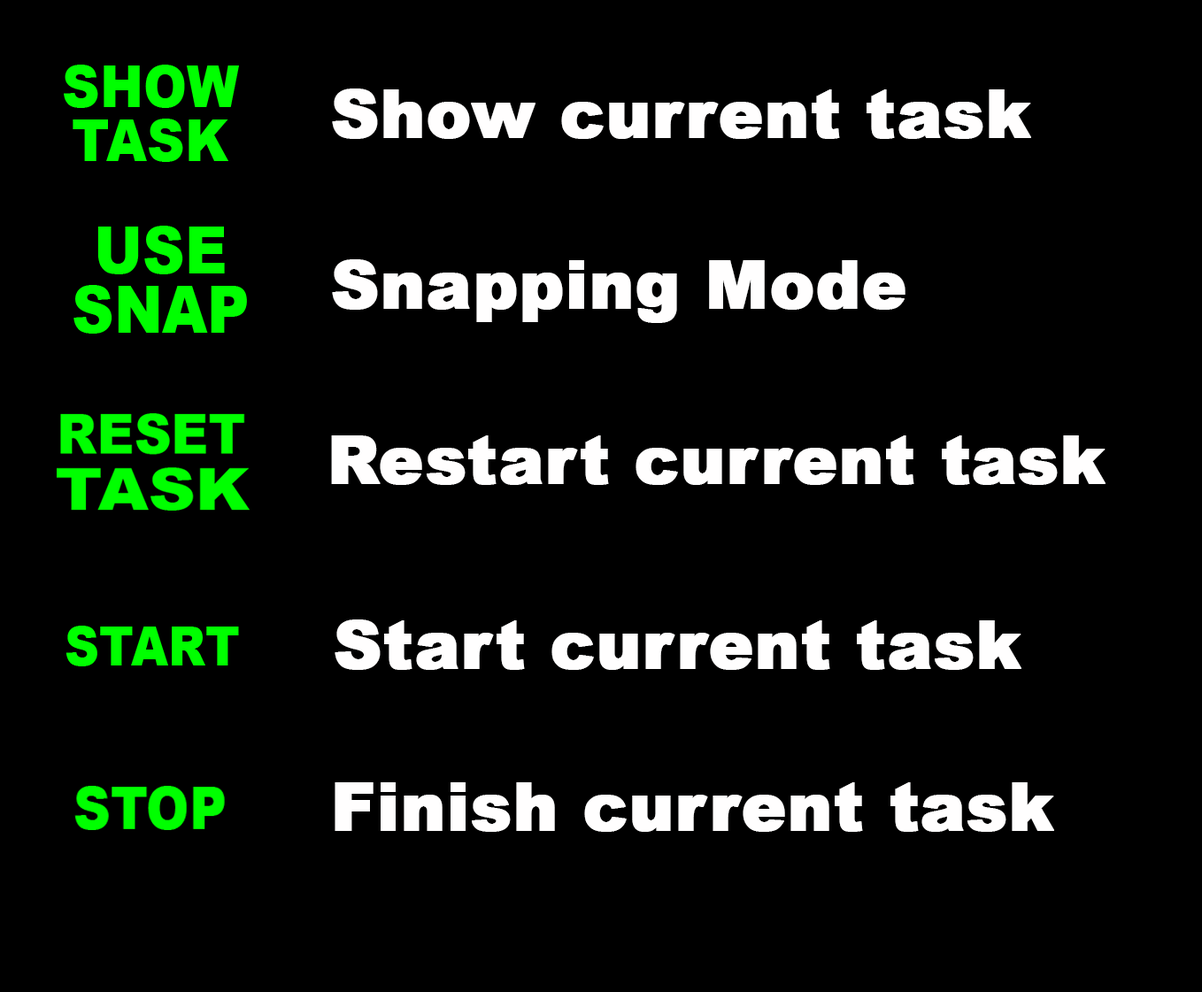
<style>
.page{position:relative;width:1202px;height:992px;background:#000000}
.page>*{position:absolute;margin:0}
.t1{font:66.4px "Arial-Black";color:#fffefe;font-weight:bold}
</style>
<div class="page">
<p class="t1" style="left:332px;top:89px;width:699px;height:50px">Show current task</p>
<p class="t1" style="left:332px;top:259px;width:573px;height:64px">Snapping Mode</p>
<p class="t1" style="left:331px;top:435px;width:774px;height:50px">Restart current task</p>
<p class="t1" style="left:335px;top:620px;width:686px;height:50px">Start current task</p>
<p class="t1" style="left:335px;top:782px;width:719px;height:50px">Finish current task</p>
</div>
